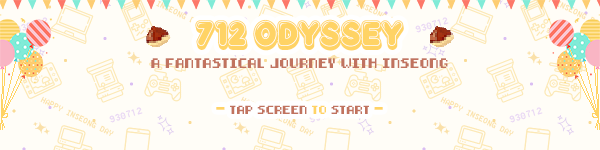
<style>
.page{position:relative;width:600px;height:150px;background:#fffdf7}
.page>*{position:absolute;margin:0}
.t1{font:41.7px "Reglisse";color:#ffd365}
.t2{font:19.8px "8-bit-pusab";color:#ffd365}
.t3{font:9.7px "8-bit-pusab";color:#c1735f}
.t4{font:8.3px "8-bit-pusab";color:#c1735f}
.t5{font:8.3px "8-bit-pusab";color:#ffd365}
</style>
<div class="page">
<p class="t1" style="left:195px;top:19px;width:209px;height:32px"><span class="t2"><br></span>712 odyssey</p>
<p class="t3" style="left:151px;top:58px;width:297px;height:10px">a fantastical journey with inseong</p>
<p class="t4" style="left:216px;top:105px;width:167px;height:9px"><span class="t5">- </span>tap screen <span class="t5">to </span>start<span class="t5"> -</span></p>
</div>
